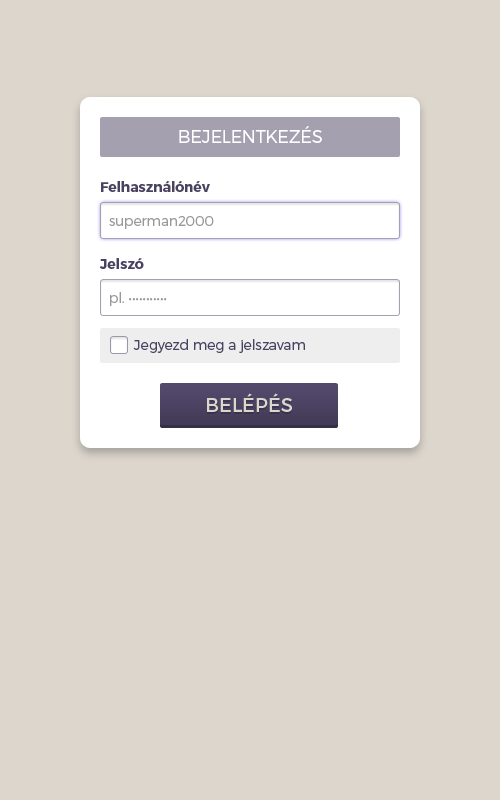
<style>
.page{position:relative;width:500px;height:800px;background:#dcd6cd}
.page>*{position:absolute;margin:0}
.t1{font:18px "Montserrat-Light";color:#ffffff;text-transform:uppercase}
.t2{font:14px "Montserrat-Bold";color:#4a4261}
.t3{font:14px "Montserrat-Light";color:#999999}
.t4{font:14px "Montserrat-Light";color:#4a4261}
.t5{font:20px "Montserrat-Regular";color:#dcd6cd;text-transform:uppercase}
</style>
<div class="page">
<p class="t1" style="left:179px;top:126px;width:143px;height:17px">Bejelentkezés</p>
<p class="t2" style="left:101px;top:181px;width:109px;height:11px">Felhasználónév</p>
<p class="t3" style="left:109px;top:216px;width:105px;height:13px">superman2000</p>
<p class="t2" style="left:99px;top:258px;width:45px;height:11px">Jelszó</p>
<p class="t3" style="left:110px;top:292px;width:57px;height:14px">pl. •••••••••••</p>
<p class="t4" style="left:133px;top:339px;width:172px;height:14px">Jegyezd meg a jelszavam</p>
<p class="t5" style="left:207px;top:393px;width:85px;height:19px">Belépés</p>
</div>
